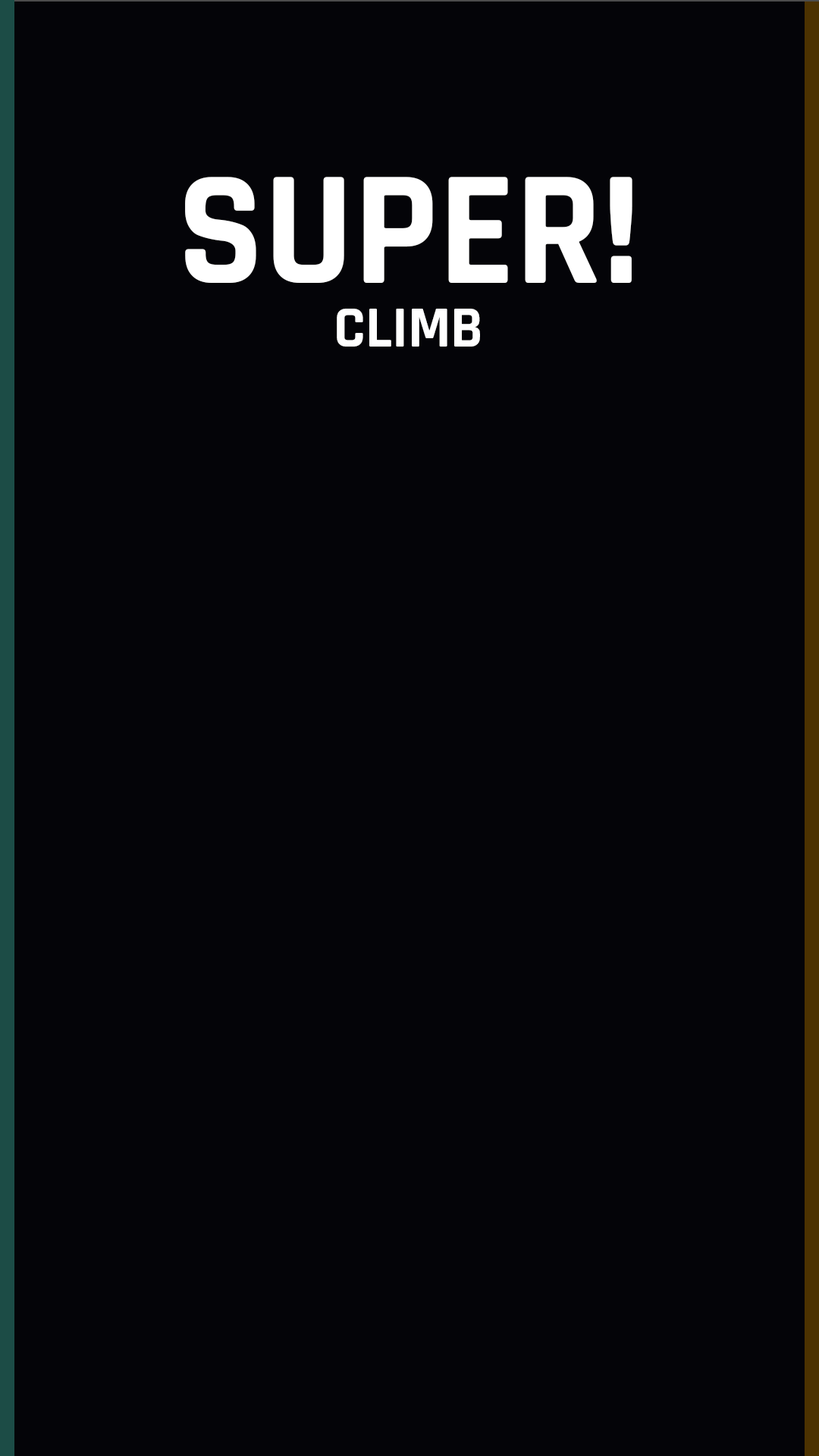
<style>
.page{position:relative;width:819px;height:1456px;background:#040408}
.page>*{position:absolute;margin:0}
.t1{font:164.7px "Rajdhani-Bold";color:#ffffff}
.t2{font:59px "Rajdhani-Bold";color:#ffffff}
</style>
<div class="page">
<p class="t1" style="left:185px;top:177px;width:447px;height:106px">SUPER!</p>
<p class="t2" style="left:337px;top:309px;width:143px;height:38px">CLIMB</p>
</div>
